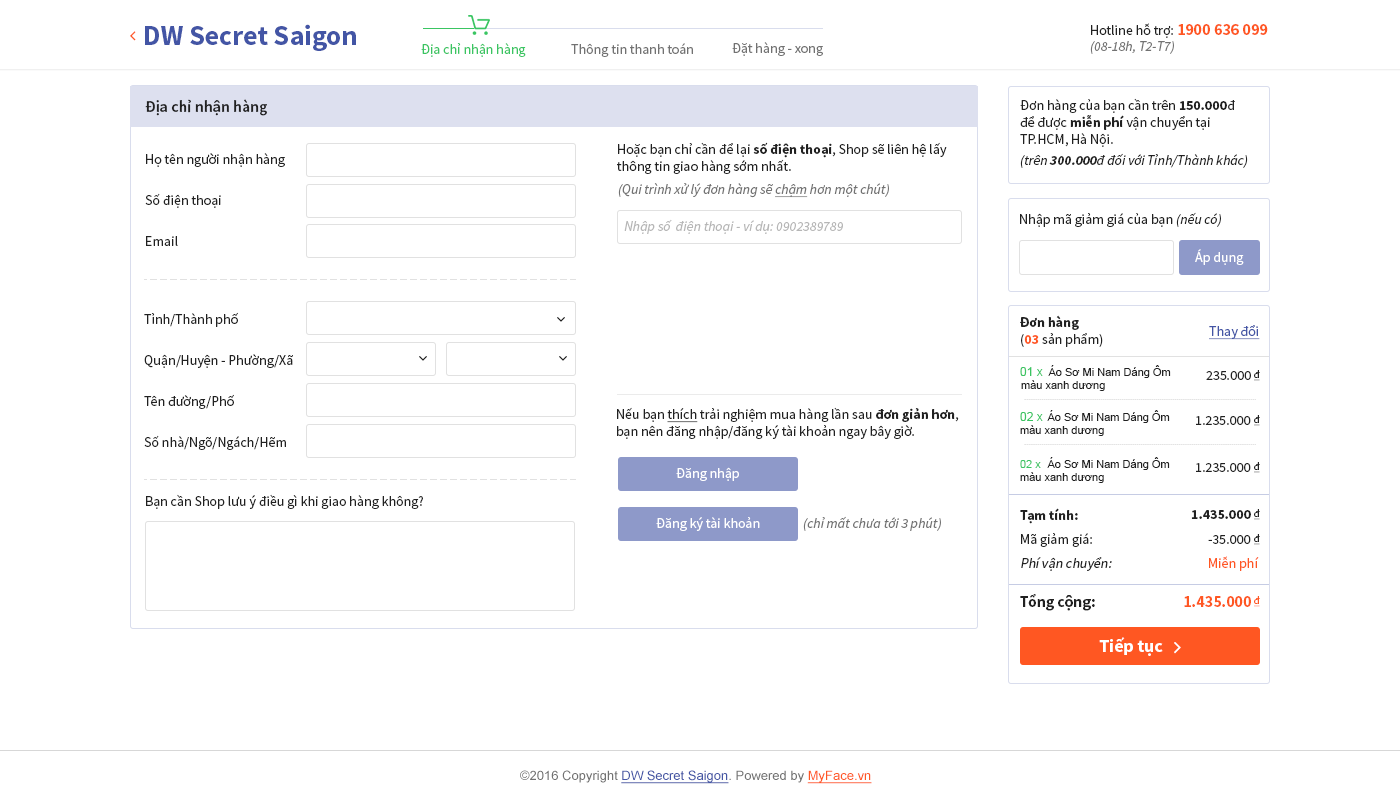
<style>
.page{position:relative;width:1400px;height:800px;background:#ffffff}
.page>*{position:absolute;margin:0}
.t1{font:28px "SourceSansPro-Bold";color:#4355a5}
.t2{font:14px "SourceSansPro-Regular";color:#212121}
.t3{font:16px "SourceSansPro-Bold";color:#ff5722}
.t4{font:14px "SourceSansPro-It";color:#727272}
.t5{font:14px "SourceSansPro-Regular";color:#3ac562}
.t6{font:14px "SourceSansPro-Regular";color:#727272}
.t7{font:16px "SourceSansPro-Semibold";color:#212121}
.t8{font:14px "SourceSansPro-Bold";color:#212121}
.t9{font:14px/41px "SourceSansPro-Regular";color:#212121}
.t10{font:14px "SourceSansPro-It";color:#212121}
.t11{font:14px "SourceSansPro-BoldIt";color:#212121}
.t12{font:14px "SourceSansPro-It";color:#727272;text-decoration:underline}
.t13{font:14px "SourceSansPro-It";color:#b6b6b6}
.t14{font:14px "SourceSansPro-Regular";color:#ffffff}
.t15{font:14px "SourceSansPro-Bold";color:#ff5722}
.t16{font:14px "SourceSansPro-Regular";color:#4355a5;text-decoration:underline}
.t17{font:11px "ArialMT";color:#212121}
.t18{font:12px "ArialMT";color:#3ac562}
.t19{font:10px "SourceSansPro-Regular";color:#212121;text-decoration:underline}
.t20{font:14px "SourceSansPro-Regular";color:#212121;text-decoration:underline}
.t21{font:11px "ArialMT";color:#3ac562}
.t22{font:14px/24px "SourceSansPro-Regular";color:#212121;font-style:italic}
.t23{font:14px/24px "SourceSansPro-Bold";color:#212121}
.t24{font:14px/24px "SourceSansPro-Regular";color:#212121}
.t25{font:14px "SourceSansPro-Regular";color:#ff5722}
.t26{font:16px "SourceSansPro-Bold";color:#212121}
.t27{font:10px "SourceSansPro-Regular";color:#ff5722;text-decoration:underline}
.t28{font:18px "SourceSansPro-Bold";color:#ffffff}
.t29{font:13px "ArialMT";color:#4355a5;text-decoration:underline}
.t30{font:13px "ArialMT";color:#727272}
.t31{font:13px "ArialMT";color:#ff5722;text-decoration:underline}
</style>
<div class="page">
<p class="t1" style="left:145px;top:24px;width:211px;height:27px">DW Secret Saigon</p>
<p class="t2" style="left:1091px;top:23px;width:177px;height:15px">Hotline hỗ trợ: <span class="t3">1900 636 099</span></p>
<p class="t4" style="left:1090px;top:41px;width:84px;height:13px">(08-18h, T2-T7)</p>
<p class="t5" style="left:421px;top:43px;width:105px;height:14px">Địa chỉ nhận hàng</p>
<p class="t6" style="left:571px;top:43px;width:122px;height:14px">Thông tin thanh toán</p>
<p class="t6" style="left:732px;top:42px;width:91px;height:14px">Đặt hàng - xong</p>
<p class="t7" style="left:145px;top:99px;width:122px;height:17px">Địa chỉ nhận hàng</p>
<p class="t2" style="left:1020px;top:98px;width:215px;height:49px">Đơn hàng của bạn cần trên <span class="t8">150.000</span>đ để được <span class="t8">miễn phí</span> vận chuyển tại TP.HCM, Hà Nội.</p>
<p class="t2" style="left:617px;top:142px;width:330px;height:32px">Hoặc bạn chỉ cần để lại <span class="t8">số điện thoại</span>, Shop sẽ liên hệ lấy<br>thông tin giao hàng sớm nhất.</p>
<p class="t9" style="left:145px;top:153px;width:140px;height:93px">Họ tên người nhận hàng<br>Số điện thoại <br>Email</p>
<p class="t10" style="left:1020px;top:153px;width:228px;height:15px">(trên <span class="t11">300.000</span>đ đối với Tỉnh/Thành khác)</p>
<p class="t4" style="left:618px;top:183px;width:271px;height:15px">(Qui trình xử lý đơn hàng sẽ <span class="t12">chậm</span> hơn một chút)</p>
<p class="t13" style="left:624px;top:219px;width:219px;height:15px">Nhập số  điện thoại - ví dụ: 0902389789</p>
<p class="t2" style="left:1020px;top:212px;width:201px;height:15px">Nhập mã giảm giá của bạn <span class="t10">(nếu có)</span></p>
<p class="t14" style="left:1195px;top:249px;width:49px;height:16px">Áp dụng</p>
<p class="t9" style="left:144px;top:312px;width:149px;height:138px">Tỉnh/Thành phố<br>Quận/Huyện - Phường/Xã<br>Tên đường/Phố<br>Số nhà/Ngõ/Ngách/Hẽm</p>
<p class="t2" style="left:1020px;top:315px;width:83px;height:32px"><span class="t8">Đơn hàng<br></span>(<span class="t15">03 </span>sản phẩm)</p>
<p class="t16" style="left:1209px;top:325px;width:51px;height:15px">Thay đổi</p>
<p class="t17" style="left:1021px;top:365px;width:150px;height:26px">Áo Sơ Mi Nam Dáng Ôm màu xanh dương</p>
<p class="t18" style="left:1020px;top:367px;width:23px;height:9px">01 x</p>
<p class="t2" style="left:1206px;top:371px;width:45px;height:9px">235.000</p>
<p class="t19" style="left:1254px;top:370px;width:6px;height:11px">đ</p>
<p class="t2" style="left:617px;top:407px;width:342px;height:32px">Nếu bạn <span class="t20">thích</span> trải nghiệm mua hàng lần sau <span class="t8">đơn giản hơn</span>, bạn nên đăng nhập/đăng ký tài khoản ngay bây giờ.</p>
<p class="t17" style="left:1020px;top:410px;width:150px;height:26px">Áo Sơ Mi Nam Dáng Ôm màu xanh dương</p>
<p class="t18" style="left:1020px;top:412px;width:23px;height:9px">02 x</p>
<p class="t2" style="left:1196px;top:416px;width:55px;height:9px">1.235.000</p>
<p class="t19" style="left:1254px;top:415px;width:6px;height:11px">đ</p>
<p class="t17" style="left:1020px;top:457px;width:150px;height:26px">Áo Sơ Mi Nam Dáng Ôm màu xanh dương</p>
<p class="t21" style="left:1020px;top:460px;width:21px;height:8px">02 x</p>
<p class="t19" style="left:1254px;top:462px;width:6px;height:11px">đ</p>
<p class="t14" style="left:676px;top:467px;width:63px;height:14px">Đăng nhập</p>
<p class="t2" style="left:1196px;top:463px;width:55px;height:9px">1.235.000</p>
<p class="t2" style="left:146px;top:494px;width:277px;height:15px">Bạn cần Shop lưu ý điều gì khi giao hàng không?</p>
<p class="t22" style="left:1020px;top:508px;width:92px;height:63px"><span class="t23">Tạm tính:<br></span><span class="t24">Mã giảm giá:<br></span>Phí vận chuyển:</p>
<p class="t8" style="left:1191px;top:510px;width:60px;height:9px">1.435.000</p>
<p class="t19" style="left:1254px;top:509px;width:6px;height:11px">đ</p>
<p class="t14" style="left:656px;top:517px;width:104px;height:14px">Đăng ký tài khoản</p>
<p class="t4" style="left:803px;top:516px;width:138px;height:15px">(chỉ mất chưa tới 3 phút)</p>
<p class="t19" style="left:1254px;top:534px;width:6px;height:11px">đ</p>
<p class="t2" style="left:1208px;top:535px;width:43px;height:9px">-35.000</p>
<p class="t25" style="left:1209px;top:556px;width:50px;height:15px">Miễn phí</p>
<p class="t26" style="left:1020px;top:594px;width:75px;height:17px">Tổng cộng:</p>
<p class="t3" style="left:1184px;top:596px;width:67px;height:11px">1.435.000</p>
<p class="t27" style="left:1254px;top:596px;width:6px;height:11px">đ</p>
<p class="t28" style="left:1099px;top:637px;width:64px;height:19px">Tiếp tục</p>
<p class="t29" style="left:520px;top:770px;width:352px;height:14px"><span class="t30">©2016 Copyright </span>DW Secret Saigon<span class="t30">. Powered by </span><span class="t31">MyFace.vn</span></p>
</div>
